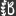
<style>
.page{position:relative;width:16px;height:16px;background:#333333}
.page>*{position:absolute;margin:0}
.t1{font:16px "PaperDaisyDEMO";color:#ffffff}
.t2{font:10px "Luna";color:#ffffff}
</style>
<div class="page">
<p class="t1" style="left:0px;top:0px;width:7px;height:17px">[</p>
<p class="t2" style="left:7px;top:1px;width:8px;height:15px">B</p>
</div>
